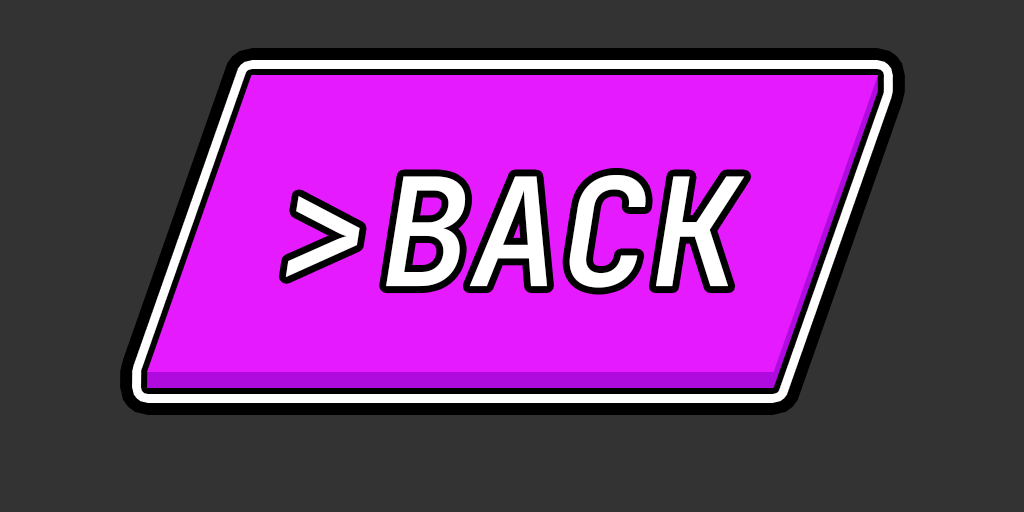
<style>
.page{position:relative;width:1024px;height:512px;background:#333333}
.page>*{position:absolute;margin:0}
.t1{font:150px "JetBrainsMonoItalic-MediumItalic";color:#ffffff}
</style>
<div class="page">
<p class="t1" style="left:285px;top:175px;width:460px;height:113px">BACK</p>
</div>
